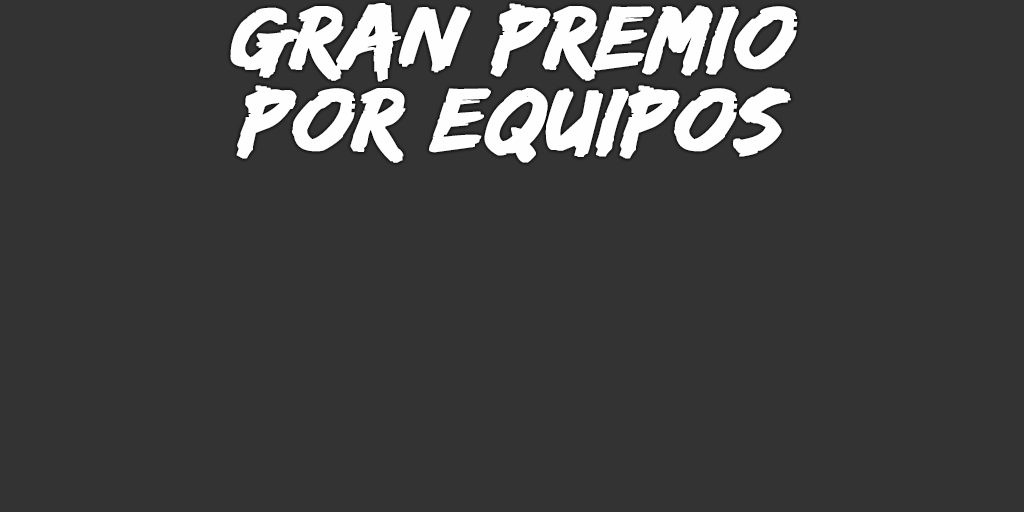
<style>
.page{position:relative;width:1024px;height:512px;background:#333333}
.page>*{position:absolute;margin:0}
.t1{font:93px/82px "EdoSZ";color:#fefefe;font-weight:bold;font-style:italic;scale:1.04 1}
</style>
<div class="page">
<p class="t1" style="left:230px;top:3px;width:568px;height:160px;text-align:center">gran premio<br>por equipos</p>
</div>
